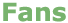
<style>
.page{position:relative;width:68px;height:23px;background:#ffffff}
.page>*{position:absolute;margin:0}
.t1{font:25px "Verdana-Bold";color:#78b36d}
</style>
<div class="page">
<p class="t1" style="left:3px;top:2px;width:63px;height:20px">Fans</p>
</div>
